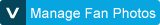
<style>
.page{position:relative;width:160px;height:25px;background:#08a6e0}
.page>*{position:absolute;margin:0}
.t1{font:14.7px "Arial-BoldMT";color:#ffffff;scale:1.37 1}
.t2{font:14px "ArialMT";color:#ffffff}
</style>
<div class="page">
<p class="t1" style="left:6px;top:7px;width:14px;height:12px">V</p>
<p class="t2" style="left:31px;top:8px;width:125px;height:13px">Manage Fan Photos</p>
</div>
